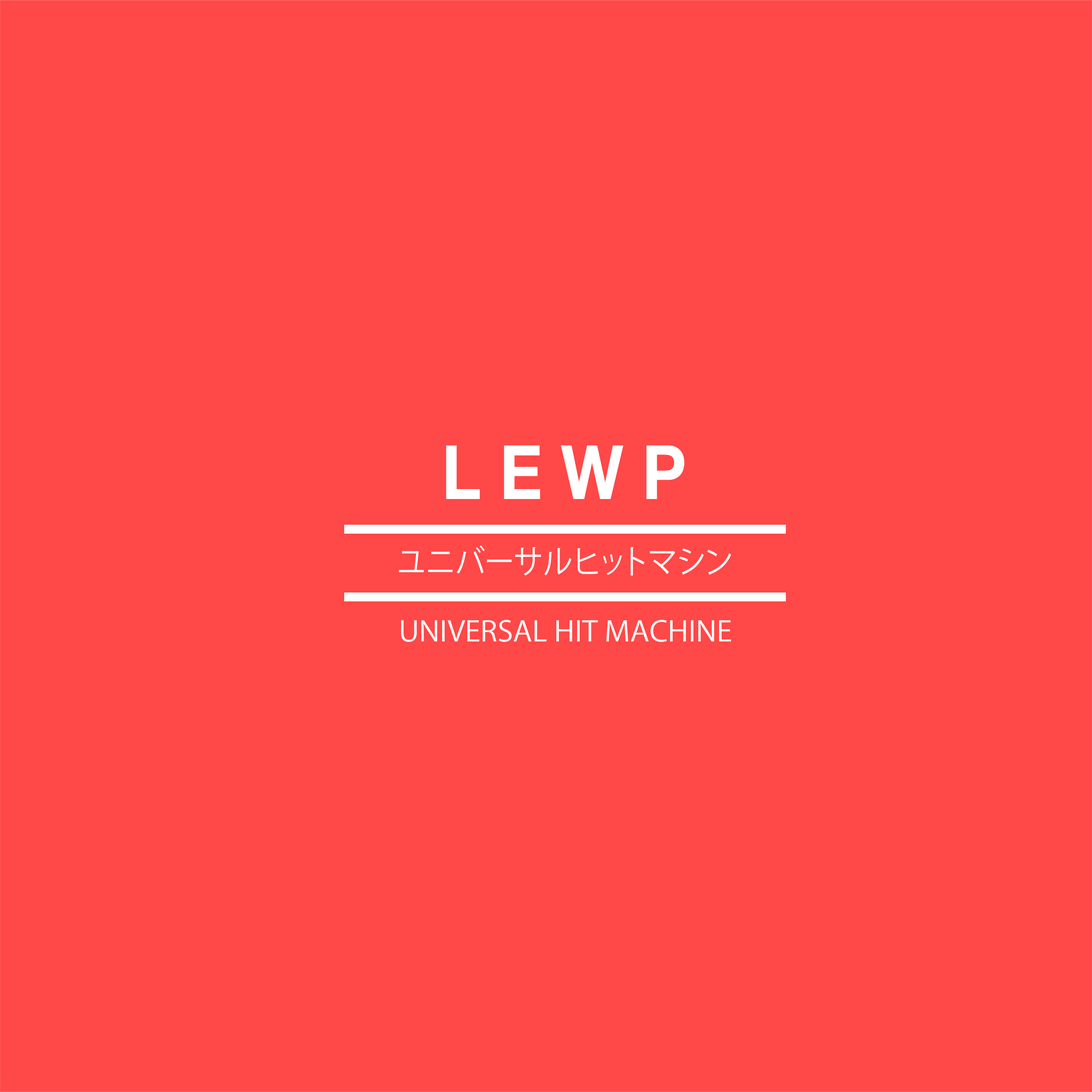
<style>
.page{position:relative;width:1092px;height:1092px;background:#ff4848}
.page>*{position:absolute;margin:0}
.t1{font:74.9px "HelveticaNeue-Bold";color:#ffffff;scale:0.89 1}
.t2{font:32.5px "KozGoPr6N-Regular";color:#ffffff;scale:0.91 1}
.t3{font:27.8px "KozGoPr6N-Regular";color:#ffffff;scale:1.06 1}
</style>
<div class="page">
<p class="t1" style="left:446px;top:445px;width:238px;height:54px">L E W P</p>
<p class="t2" style="left:399px;top:545px;width:332px;height:31px">ユニバーサルヒットマシン</p>
<p class="t3" style="left:401px;top:620px;width:330px;height:22px">UNIVERSAL HIT MACHINE</p>
</div>
